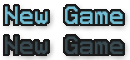
<style>
.page{position:relative;width:130px;height:60px;background:#1a1a1a}
.page>*{position:absolute;margin:0}
.t1{font:20px "VHSGothic";color:#73bed3}
</style>
<div class="page">
<p class="t1" style="left:5px;top:6px;width:118px;height:18px">New Game</p>
</div>
